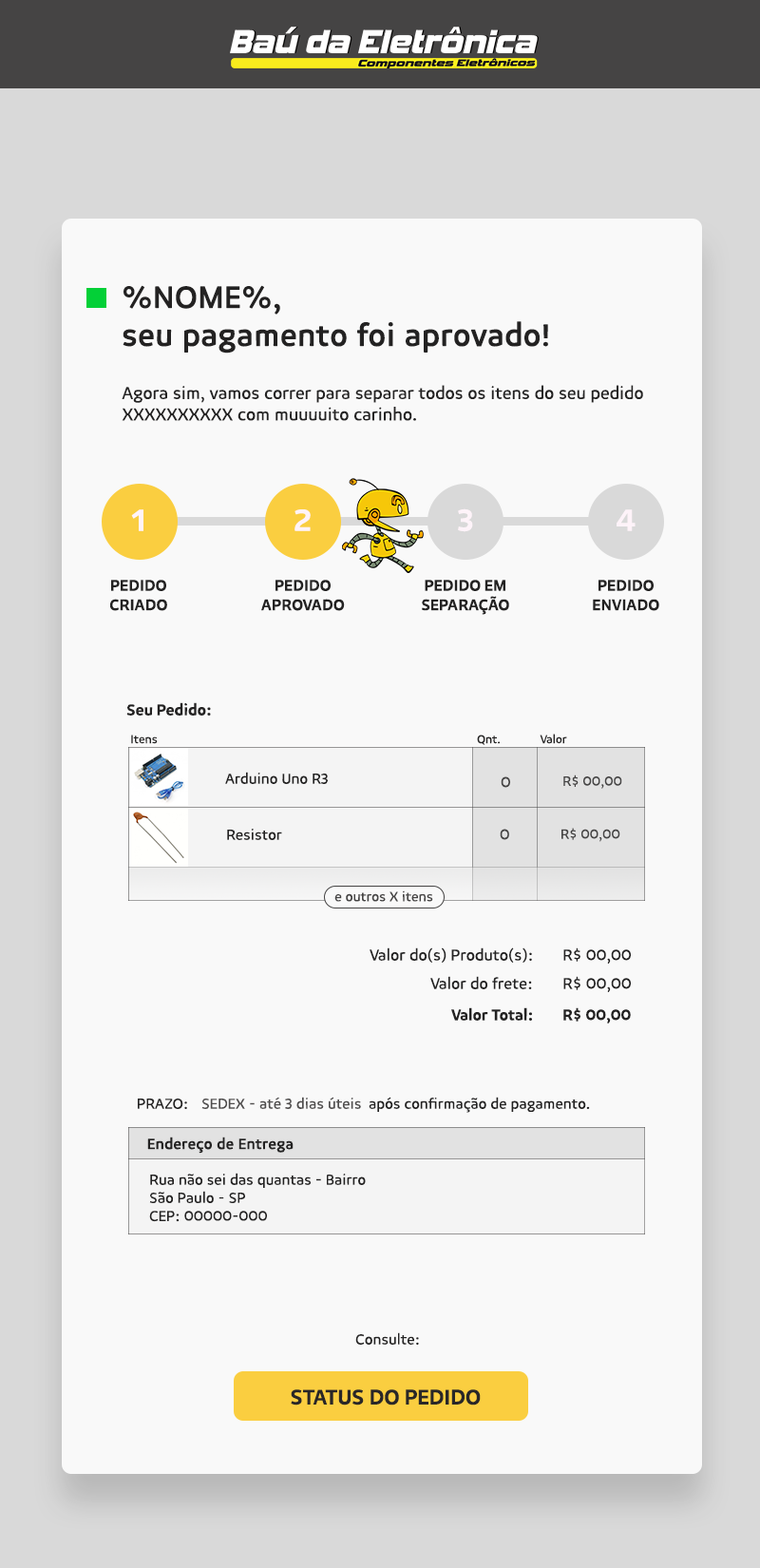
<style>
.page{position:relative;width:760px;height:1568px;background:#f9f9f9}
.page>*{position:absolute;margin:0}
.t1{font:31.7px "Niva-Book";color:#232222;font-weight:bold}
.t2{font:17.8px "Niva-Book";color:#232222}
.t3{font:32.4px "Niva-Medium";color:#fef3f9}
.t4{font:16.2px "Niva-Medium";color:#232222}
.t5{font:12.1px "Niva-Book";color:#232222}
.t6{font:15.1px "Niva-Book";color:#232222}
.t7{font:15.8px "Niva-Book";color:#454444}
.t8{font:14px "Niva-Book";color:#454444}
.t9{font:16.2px "Niva-Book";color:#232222}
.t10{font:15.1px "Niva-Book";color:#4f4d4d}
.t11{font:15.2px "Niva-Book";color:#232222;font-weight:bold}
.t12{font:22.2px "Niva-Medium";color:#292728}
</style>
<div class="page">
<p class="t1" style="left:123px;top:285px;width:425px;height:69px;text-align:right">%NOME%, <br>seu pagamento foi aprovado!</p>
<p class="t2" style="left:122px;top:385px;width:521px;height:36px;text-align:right">Agora sim, vamos correr para separar todos os itens do seu pedido XXXXXXXXXX com muuuuito carinho.</p>
<p class="t3" style="left:131px;top:509px;width:12px;height:22px">1</p>
<p class="t3" style="left:295px;top:509px;width:16px;height:22px">2</p>
<p class="t3" style="left:458px;top:508px;width:15px;height:24px">3</p>
<p class="t3" style="left:617px;top:509px;width:19px;height:22px">4</p>
<p class="t4" style="left:110px;top:580px;width:57px;height:31px;text-align:center">PEDIDO CRIADO</p>
<p class="t4" style="left:261px;top:580px;width:84px;height:31px;text-align:center">PEDIDO APROVADO</p>
<p class="t4" style="left:422px;top:580px;width:87px;height:35px;text-align:center">PEDIDO EM SEPARAÇÃO</p>
<p class="t4" style="left:593px;top:580px;width:67px;height:31px;text-align:center">PEDIDO ENVIADO</p>
<p class="t4" style="left:126px;top:702px;width:85px;height:14px">Seu Pedido:</p>
<p class="t5" style="left:131px;top:735px;width:27px;height:9px">Itens</p>
<p class="t5" style="left:477px;top:735px;width:23px;height:10px">Qnt.</p>
<p class="t5" style="left:540px;top:734px;width:27px;height:10px">Valor</p>
<p class="t6" style="left:225px;top:772px;width:103px;height:12px">Arduino Uno R3</p>
<p class="t7" style="left:501px;top:776px;width:9px;height:12px">0</p>
<p class="t8" style="left:564px;top:774px;width:58px;height:15px">R$ 00,00</p>
<p class="t6" style="left:227px;top:829px;width:55px;height:11px">Resistor</p>
<p class="t7" style="left:500px;top:829px;width:9px;height:11px">0</p>
<p class="t8" style="left:562px;top:828px;width:59px;height:14px">R$ 00,00</p>
<p class="t8" style="left:335px;top:890px;width:98px;height:12px">e outros X itens</p>
<p class="t9" style="left:370px;top:947px;width:162px;height:16px">Valor do(s) Produto(s):</p>
<p class="t9" style="left:564px;top:947px;width:67px;height:17px">R$ 00,00</p>
<p class="t9" style="left:430px;top:976px;width:102px;height:13px">Valor do frete:</p>
<p class="t9" style="left:564px;top:976px;width:67px;height:16px">R$ 00,00</p>
<p class="t4" style="left:451px;top:1007px;width:81px;height:14px">Valor Total:</p>
<p class="t4" style="left:564px;top:1007px;width:67px;height:16px">R$ 00,00</p>
<p class="t10" style="left:201px;top:1097px;width:160px;height:12px">SEDEX - até 3 dias úteis</p>
<p class="t6" style="left:369px;top:1097px;width:221px;height:16px">após confirmação de pagamento.</p>
<p class="t6" style="left:138px;top:1099px;width:49px;height:10px">PRAZO:</p>
<p class="t11" style="left:147px;top:1137px;width:147px;height:17px">Endereço de Entrega</p>
<p class="t6" style="left:149px;top:1173px;width:217px;height:49px;text-align:right">Rua não sei das quantas - Bairro<br>São Paulo - SP<br>CEP: 00000-000</p>
<p class="t6" style="left:355px;top:1332px;width:64px;height:13px">Consulte:</p>
<p class="t12" style="left:291px;top:1389px;width:190px;height:16px">STATUS DO PEDIDO</p>
</div>
